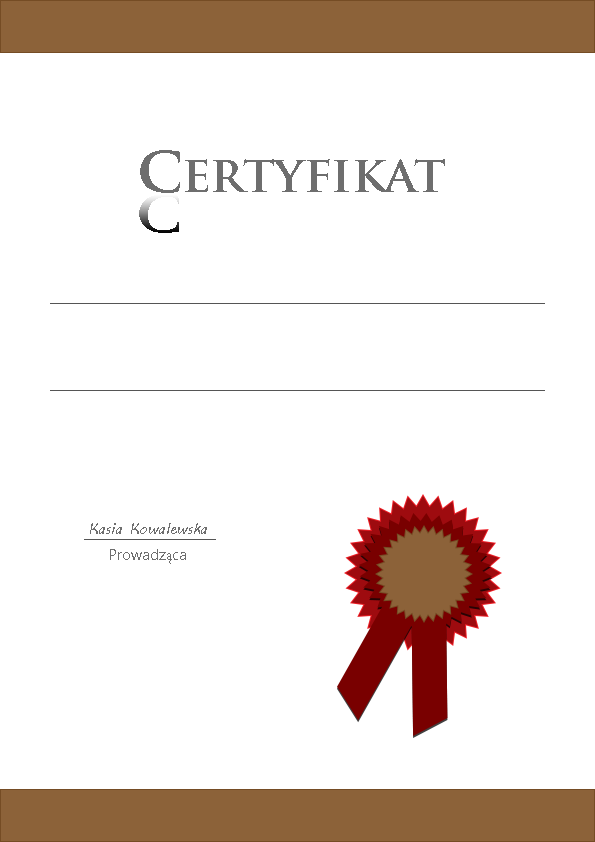
<style>
.page{position:relative;width:595px;height:842px;background:#ffffff}
.page>*{position:absolute;margin:0}
.t1{font:50px "TrajanPro-Bold";color:#6e6e6e}
.t2{font:65px "TrajanPro-Bold";color:#6e6e6e}
.t3{font:57.8px "TrajanPro-Bold";scale:1.13 1}
.t4{font:15px "MVBoli";color:#6e6e6e}
.t5{font:15px "MyanmarText";color:#6e6e6e}
.t6{font:15px "MinionPro-Regular";color:#6e6e6e}
</style>
<div class="page">
<p class="t1" style="left:140px;top:150px;width:305px;height:43px"><span class="t2">c</span>ertyfikat</p>
<p class="t3" style="left:139px;top:194px;width:40px;height:39px">c</p>
<p class="t4" style="left:90px;top:523px;width:117px;height:11px">Kasia Kowalewska</p>
<p class="t5" style="left:110px;top:549px;width:76px;height:15px">Prowadz<span class="t6">ą</span>ca</p>
</div>
